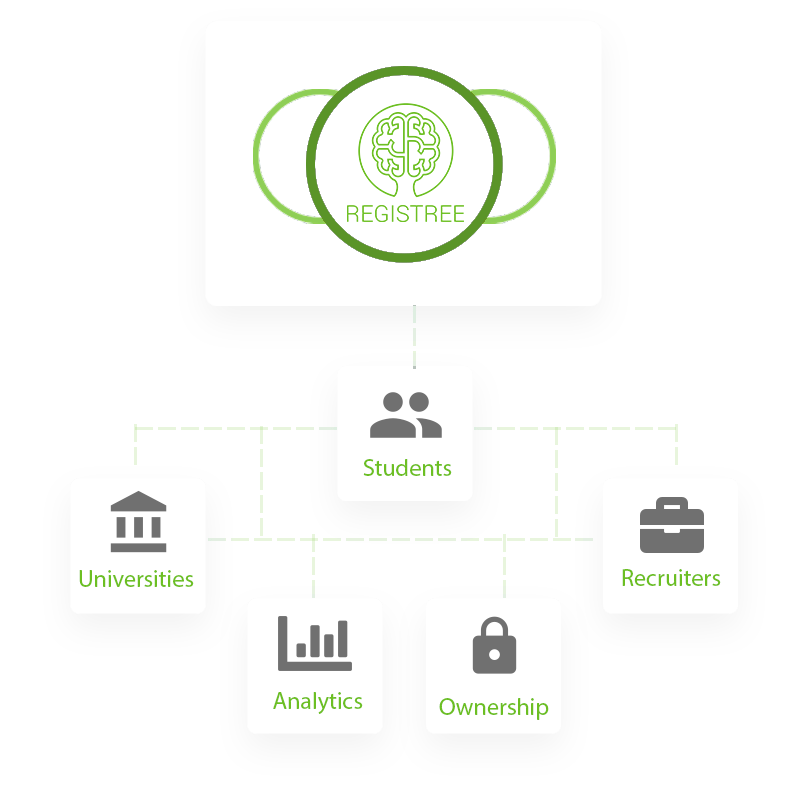
<style>
.page{position:relative;width:810px;height:786px;background:#ffffff}
.page>*{position:absolute;margin:0}
.t1{font:24px "MyriadPro-Regular";color:#6cbf22}
</style>
<div class="page">
<p class="t1" style="left:363px;top:459px;width:89px;height:17px">Students</p>
<p class="t1" style="left:622px;top:569px;width:99px;height:17px">Recruiters</p>
<p class="t1" style="left:79px;top:570px;width:115px;height:17px">Universities</p>
<p class="t1" style="left:273px;top:692px;width:90px;height:22px">Analytics</p>
<p class="t1" style="left:439px;top:698px;width:110px;height:22px">Ownership</p>
</div>
